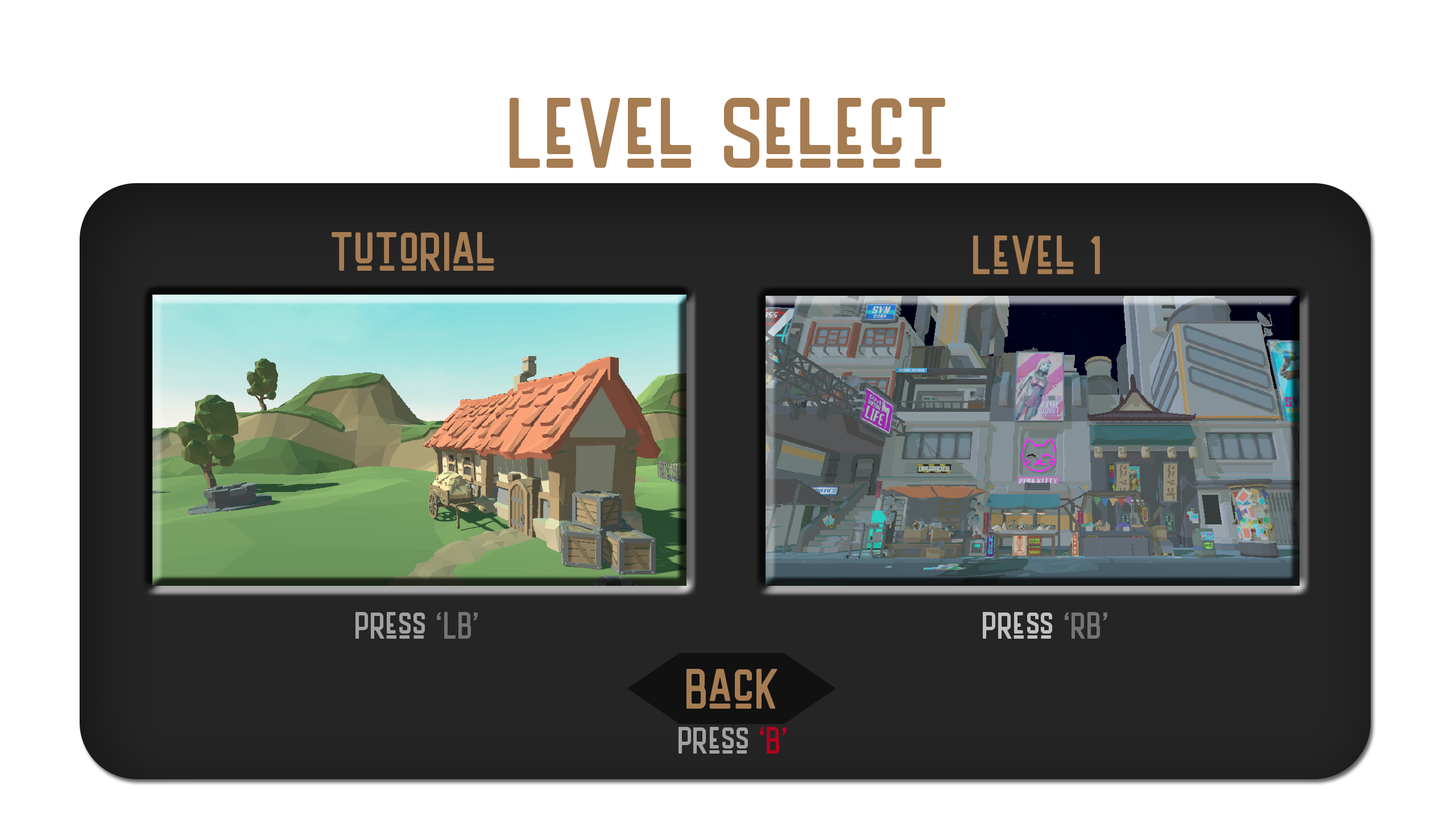
<style>
.page{position:relative;width:1456px;height:819px;background:#ffffff}
.page>*{position:absolute;margin:0}
.t1{font:99.9px "HANDLERRegular";letter-spacing:0.025em;color:#a67c52}
.t2{font:54.9px "HANDLERRegular";letter-spacing:0.025em;color:#a67c52}
.t3{font:37.9px "HANDLERRegular";letter-spacing:0.025em;color:#a1a1a1}
.t4{font:37.9px "HANDLERRegular";letter-spacing:0.025em;color:#747474}
.t5{font:37.9px "HANDLERRegular";letter-spacing:0.025em;color:#c0c0c0}
.t6{font:56.9px "HANDLERRegular";letter-spacing:0.025em;color:#a67c52}
.t7{font:37.9px "HANDLERRegular";letter-spacing:0.025em;color:#b1001e}
</style>
<div class="page">
<p class="t1" style="left:510px;top:97px;width:435px;height:71px">Level Select</p>
<p class="t2" style="left:332px;top:232px;width:162px;height:39px">Tutorial</p>
<p class="t2" style="left:973px;top:235px;width:127px;height:39px">Level 1</p>
<p class="t3" style="left:355px;top:612px;width:123px;height:27px">Press <span class="t4">‘LB’</span></p>
<p class="t5" style="left:983px;top:612px;width:124px;height:27px">Press <span class="t4">‘RB’</span></p>
<p class="t3" style="left:679px;top:669px;width:108px;height:85px;text-align:center"><span class="t6">Back<br></span>Press <span class="t7">‘B’</span></p>
</div>
